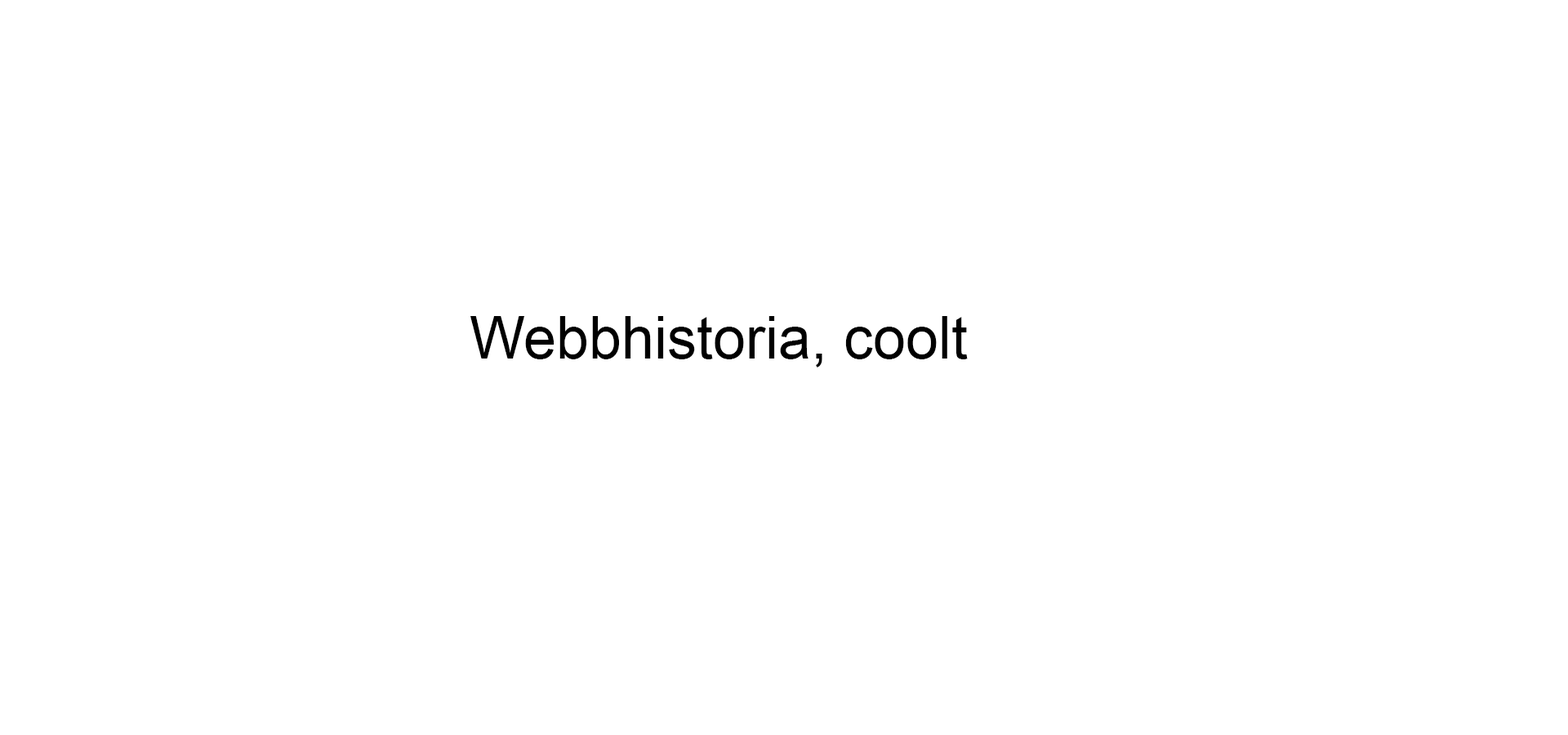
<style>
.page{position:relative;width:1568px;height:735px;background:#ffffff}
.page>*{position:absolute;margin:0}
.t1{font:58.8px "ArialMT";color:#000000}
</style>
<div class="page">
<p class="t1" style="left:470px;top:316px;width:498px;height:52px">Webbhistoria, coolt</p>
</div>
